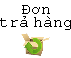
<style>
.page{position:relative;width:71px;height:58px;background:#ffffff}
.page>*{position:absolute;margin:0}
.t1{font:12px/13.3px "CourierNewPSMT";color:#000000}
</style>
<div class="page">
<p class="t1" style="left:0px;top:5px;width:72px;height:25px;text-align:center">Đơn<br>trả hàng</p>
</div>
